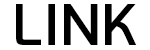
<style>
.page{position:relative;width:150px;height:50px;background:#ffffff}
.page>*{position:absolute;margin:0}
.t1{font:58.3px "GyeonggiTitleMOTF";color:#000000}
</style>
<div class="page">
<p class="t1" style="left:16px;top:4px;width:121px;height:41px">LINK</p>
</div>
